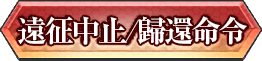
<style>
.page{position:relative;width:262px;height:61px}
.page>*{position:absolute;margin:0}
.t1{font:30px "RyuminPr6N-ExBold";letter-spacing:-0.1em;color:#ffffff}
</style>
<div class="page">
<p class="t1" style="left:18px;top:16px;width:229px;height:29px">遠征中止/歸還命令</p>
</div>
